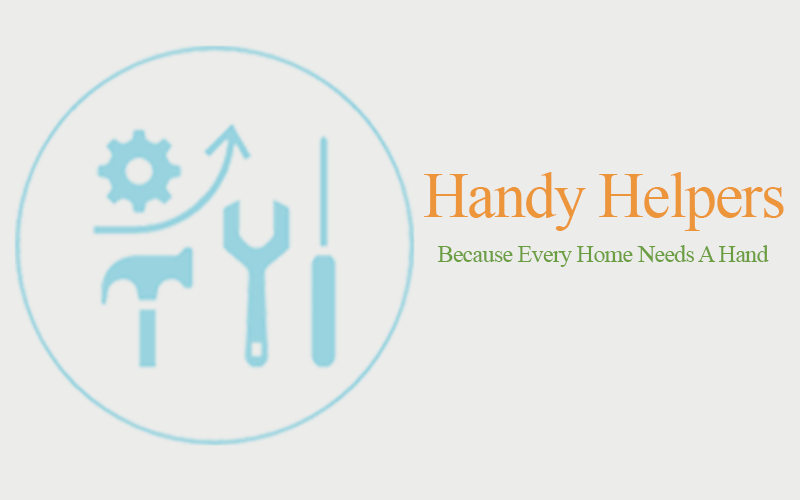
<style>
.page{position:relative;width:800px;height:500px;background:#ececea}
.page>*{position:absolute;margin:0}
.t1{font:64px "TimesNewRomanPSMT";letter-spacing:-0.03em;color:#ec953a}
.t2{font:24px "TimesNewRomanPSMT";letter-spacing:-0.03em;color:#6b9e40}
</style>
<div class="page">
<p class="t1" style="left:424px;top:172px;width:360px;height:59px">Handy Helpers</p>
<p class="t2" style="left:437px;top:245px;width:332px;height:22px">Because Every Home Needs A Hand</p>
</div>
